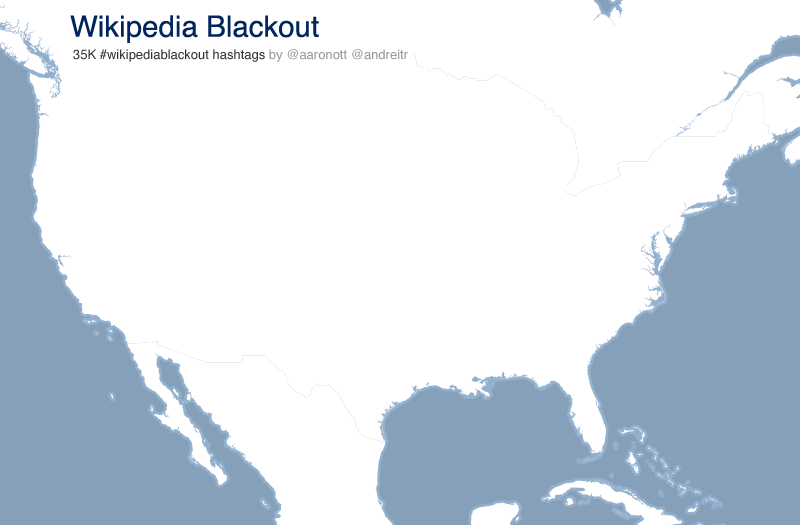
<style>
.page{position:relative;width:800px;height:525px;background:#ffffff}
.page>*{position:absolute;margin:0}
.t1{font:29.5px "Helvetica";color:#01265e}
.t2{font:13px "Helvetica";color:#333333}
.t3{font:13px "Helvetica";color:#999999}
</style>
<div class="page">
<p class="t1" style="left:70px;top:15px;width:249px;height:28px">Wikipedia Blackout</p>
<p class="t2" style="left:73px;top:49px;width:335px;height:13px">35K #wikipediablackout hashtags <span class="t3">by @aaronott @andreitr</span></p>
</div>
